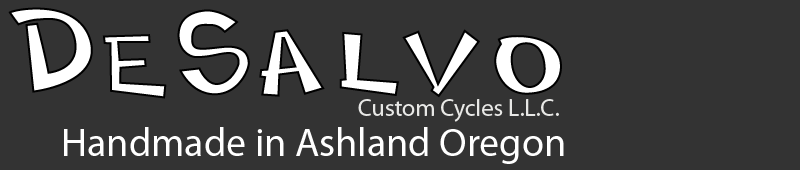
<style>
.page{position:relative;width:800px;height:170px;background:#333333}
.page>*{position:absolute;margin:0}
.t1{font:24px "MyriadPro-Regular";color:#e8e8e6}
.t2{font:40px "MyriadPro-Regular";color:#ffffff}
</style>
<div class="page">
<p class="t1" style="left:358px;top:99px;width:201px;height:23px">Custom Cycles L.L.C.</p>
<p class="t2" style="left:64px;top:127px;width:500px;height:37px">Handmade in Ashland Oregon</p>
</div>
